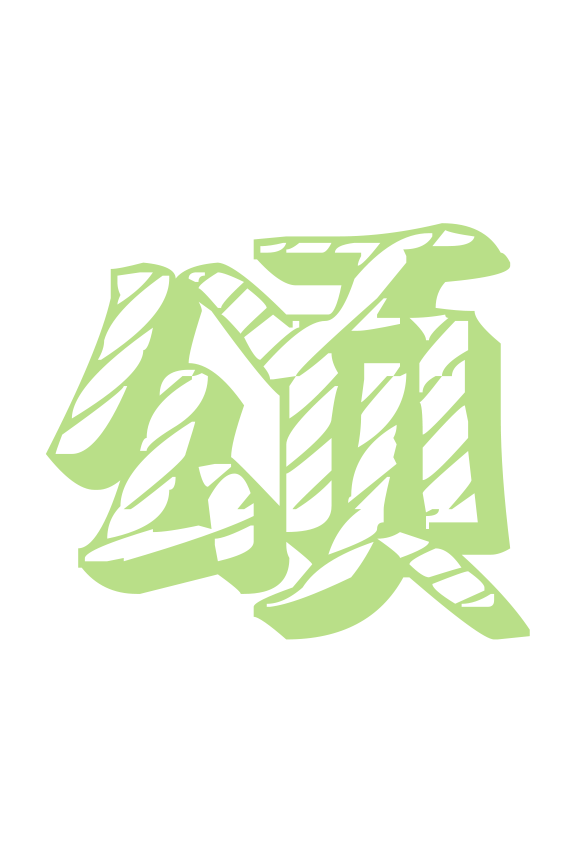
<style>
.page{position:relative;width:576px;height:864px;background:#ffffff}
.page>*{position:absolute;margin:0}
.t1{font:521.4px "SentyCHALK";color:#b9df88}
</style>
<div class="page">
<p class="t1" style="left:45px;top:223px;width:485px;height:417px">颂</p>
</div>
